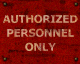
<style>
.page{position:relative;width:80px;height:64px}
.page>*{position:absolute;margin:0}
.t1{font:10.5px/14px "Tahoma-Bold";text-transform:uppercase;scale:1.05 1}
</style>
<div class="page">
<p class="t1" style="left:3px;top:14px;width:75px;height:37px;text-align:center">AUTHORIZED<br>personnel<br>only</p>
</div>
